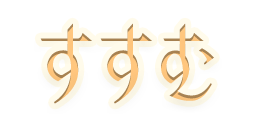
<style>
.page{position:relative;width:256px;height:128px;background:#ffffff}
.page>*{position:absolute;margin:0}
.t1{font:100px "Koku-Mincho-Regular";letter-spacing:-0.025em;color:#ffc67d}
</style>
<div class="page">
<p class="t1" style="left:40px;top:23px;width:174px;height:81px">すすむ</p>
</div>
